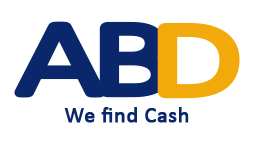
<style>
.page{position:relative;width:254px;height:141px;background:#ffffff}
.page>*{position:absolute;margin:0}
.t1{font:109.2px "Calibri";letter-spacing:-0.12em;color:#0a276c;font-weight:bold;scale:1.42 1}
.t2{font:109.2px "Calibri";letter-spacing:-0.12em;color:#f2a90b;font-weight:bold;scale:1.42 1}
.t3{font:22.4px "Calibri";color:#0a276c;font-weight:bold}
</style>
<div class="page">
<p class="t1" style="left:14px;top:21px;width:157px;height:77px">AB</p>
<p class="t2" style="left:157px;top:22px;width:83px;height:77px">D</p>
<p class="t3" style="left:64px;top:107px;width:125px;height:16px">We find Cash</p>
</div>
